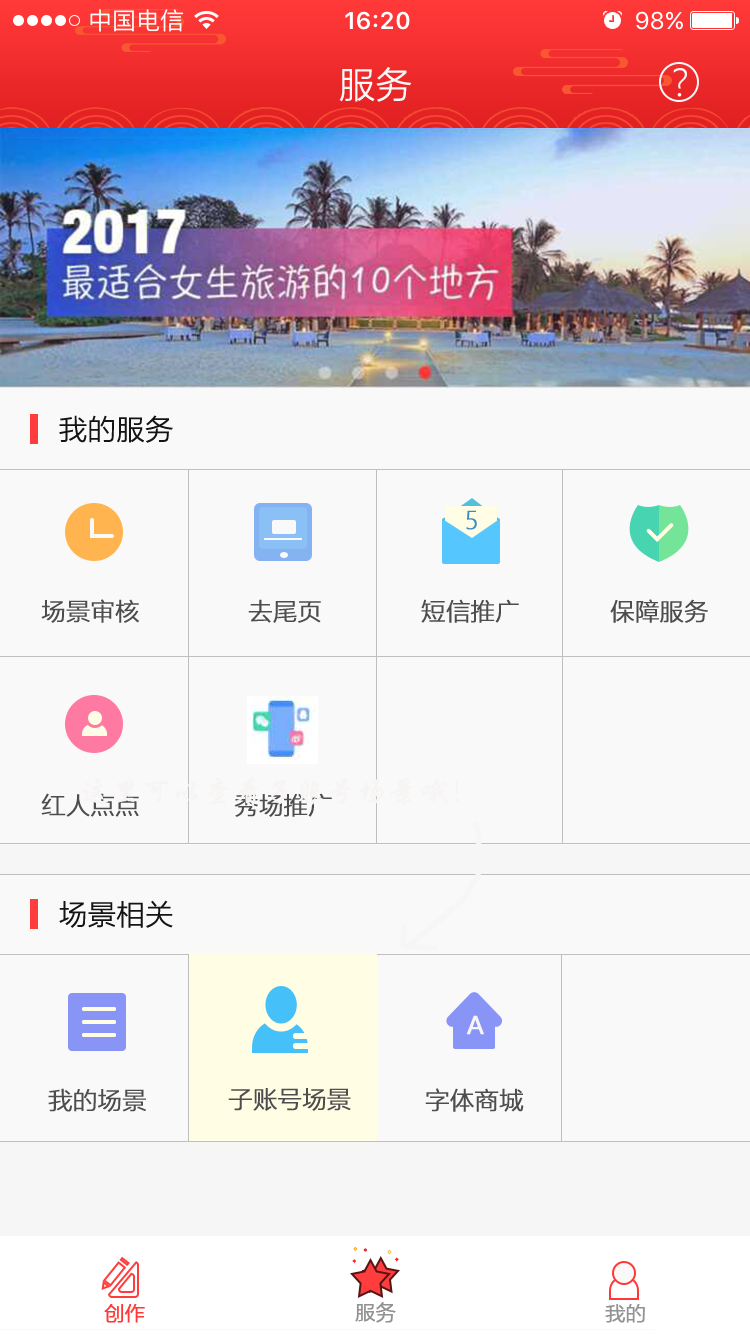
<style>
.page{position:relative;width:750px;height:1334px;background:#faf9f9}
.page>*{position:absolute;margin:0}
.t1{font:36px "MicrosoftYaHeiLight";color:#faf9f9;font-weight:bold}
.t2{font:28px "MicrosoftYaHeiLight";color:#141414;font-weight:bold}
.t3{font:24px "MicrosoftYaHeiLight";color:#378cca;font-weight:bold}
.t4{font:24px "MicrosoftYaHeiLight";color:#4e4d4d;font-weight:bold}
.t5{font:24px "MicrosoftYaHei";color:#f7f5f5;font-weight:bold}
.t6{font:20px "MicrosoftYaHeiLight";color:#929292;font-weight:bold}
.t7{font:20px "MicrosoftYaHeiLight";color:#ff3838;font-weight:bold}
</style>
<div class="page">
<p class="t1" style="left:339px;top:67px;width:73px;height:35px">服务</p>
<p class="t1" style="left:673px;top:68px;width:14px;height:29px">？</p>
<p class="t2" style="left:59px;top:415px;width:114px;height:28px">我的服务</p>
<p class="t3" style="left:466px;top:510px;width:11px;height:20px">5</p>
<p class="t4" style="left:41px;top:599px;width:98px;height:24px">场景审核</p>
<p class="t4" style="left:248px;top:599px;width:73px;height:24px">去尾页</p>
<p class="t4" style="left:421px;top:599px;width:98px;height:24px">短信推广</p>
<p class="t4" style="left:610px;top:599px;width:98px;height:24px">保障服务</p>
<p class="t4" style="left:41px;top:793px;width:98px;height:24px">红人点点</p>
<p class="t4" style="left:234px;top:793px;width:98px;height:24px">秀场推广</p>
<p class="t2" style="left:59px;top:900px;width:114px;height:28px">场景相关</p>
<p class="t5" style="left:466px;top:1015px;width:18px;height:20px">A</p>
<p class="t4" style="left:48px;top:1088px;width:98px;height:24px">我的场景</p>
<p class="t4" style="left:228px;top:1088px;width:123px;height:23px">子账号场景</p>
<p class="t4" style="left:425px;top:1088px;width:99px;height:24px">字体商城</p>
<p class="t6" style="left:355px;top:1302px;width:41px;height:21px">服务</p>
<p class="t7" style="left:104px;top:1304px;width:41px;height:19px">创作</p>
<p class="t6" style="left:605px;top:1304px;width:40px;height:19px">我的</p>
</div>
